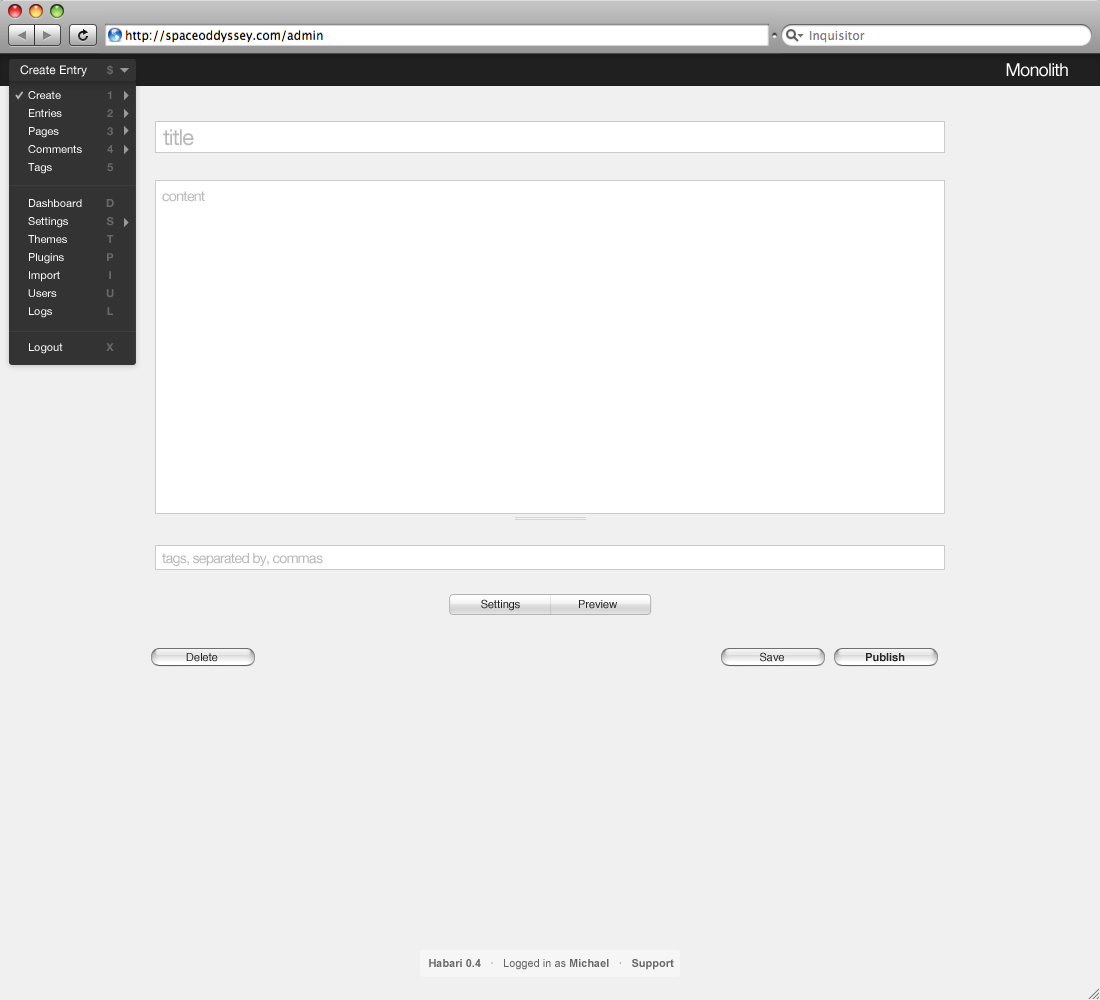
<style>
.page{position:relative;width:1100px;height:1000px;background:#f0f0f0}
.page>*{position:absolute;margin:0}
.t1{font:12px "HelveticaNeue";color:#ffffff}
.t2{font:11px "HelveticaNeue-Bold";color:#6a6a6a}
.t3{font:18px "HelveticaNeue";letter-spacing:-0.05em;color:#ffffff}
.t4{font:11px/18px "HelveticaNeue";color:#ffffff}
.t5{font:11px/18px "HelveticaNeue-Bold";color:#6a6a6a}
.t6{font:22px "HelveticaNeue";letter-spacing:-0.05em;color:#b8b8b8}
.t7{font:14px "HelveticaNeue";letter-spacing:-0.05em;color:#b8b8b8}
.t8{font:11px "Helvetica";color:#222222}
.t9{font:11px "Helvetica";color:#242424}
.t10{font:11px "Helvetica-Bold";color:#242424}
.t11{font:11px "ArialMT";color:#666666}
.t12{font:11px "Arial-BoldMT";color:#666666}
</style>
<div class="page">
<p class="t1" style="left:20px;top:65px;width:67px;height:12px">Create Entry</p>
<p class="t2" style="left:107px;top:65px;width:6px;height:10px">$</p>
<p class="t3" style="left:1006px;top:63px;width:62px;height:14px">Monolith</p>
<p class="t4" style="left:28px;top:91px;width:54px;height:263px">Create<br>Entries<br>Pages<br>Comments<br>Tags<br><br>Dashboard<br>Settings<br>Themes<br>Plugins<br>Import<br>Users<br>Logs<br><br>Logout</p>
<p class="t5" style="left:106px;top:91px;width:8px;height:260px;text-align:center">1<br>2<br>3<br>4<br>5<br><br>D<br>S<br>T<br>P<br>I<br>U<br>L<br><br>X</p>
<p class="t6" style="left:163px;top:129px;width:31px;height:17px">title</p>
<p class="t7" style="left:162px;top:191px;width:43px;height:11px">content</p>
<p class="t7" style="left:162px;top:553px;width:161px;height:13px">tags, separated by, commas</p>
<p class="t8" style="left:481px;top:599px;width:39px;height:12px">Settings</p>
<p class="t8" style="left:579px;top:600px;width:38px;height:9px">Preview</p>
<p class="t9" style="left:186px;top:653px;width:32px;height:9px">Delete</p>
<p class="t9" style="left:760px;top:652px;width:24px;height:10px">Save</p>
<p class="t10" style="left:866px;top:653px;width:39px;height:9px">Publish</p>
<p class="t11" style="left:429px;top:959px;width:245px;height:11px"><span class="t12">Habari 0.4  </span> ·   Logged in as <span class="t12">Michael  </span> ·   <span class="t12">Support</span></p>
</div>
